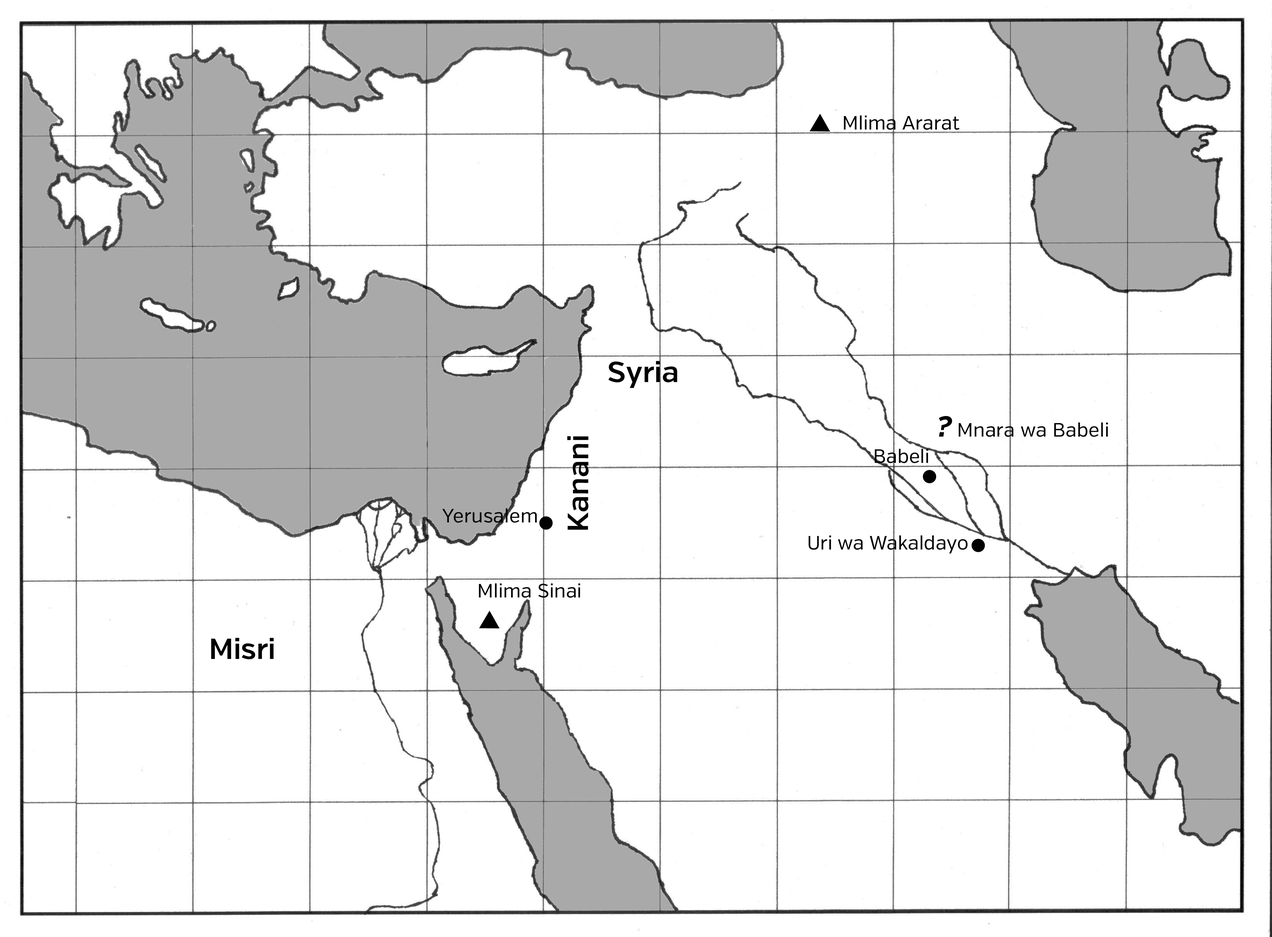
<style>
.page{position:relative;width:1272px;height:937px;background:#ffffff}
.page>*{position:absolute;margin:0}
.t1{font:19.3px "VerbRegular";color:#000000}
.t2{font:29px "VerbSemibold";color:#000000}
.t3{font:29px "VerbRegular-BoldItalic";color:#000000}
</style>
<div class="page">
<p class="t1" style="left:844px;top:115px;width:116px;height:15px">Mlima Ararat</p>
<p class="t2" style="left:608px;top:361px;width:70px;height:27px">Syria</p>
<p class="t3" style="left:939px;top:416px;width:14px;height:21px">?</p>
<p class="t1" style="left:959px;top:422px;width:149px;height:15px">Mnara wa Babeli</p>
<p class="t2" style="left:567px;top:436px;width:22px;height:94px;rotate:-90deg">Kanani</p>
<p class="t1" style="left:875px;top:449px;width:54px;height:14px">Babeli</p>
<p class="t1" style="left:442px;top:508px;width:95px;height:15px">Yerusalem</p>
<p class="t1" style="left:809px;top:535px;width:159px;height:19px">Uri wa Wakaldayo</p>
<p class="t1" style="left:479px;top:583px;width:102px;height:15px">Mlima Sinai</p>
<p class="t2" style="left:211px;top:638px;width:63px;height:21px">Misri</p>
</div>
